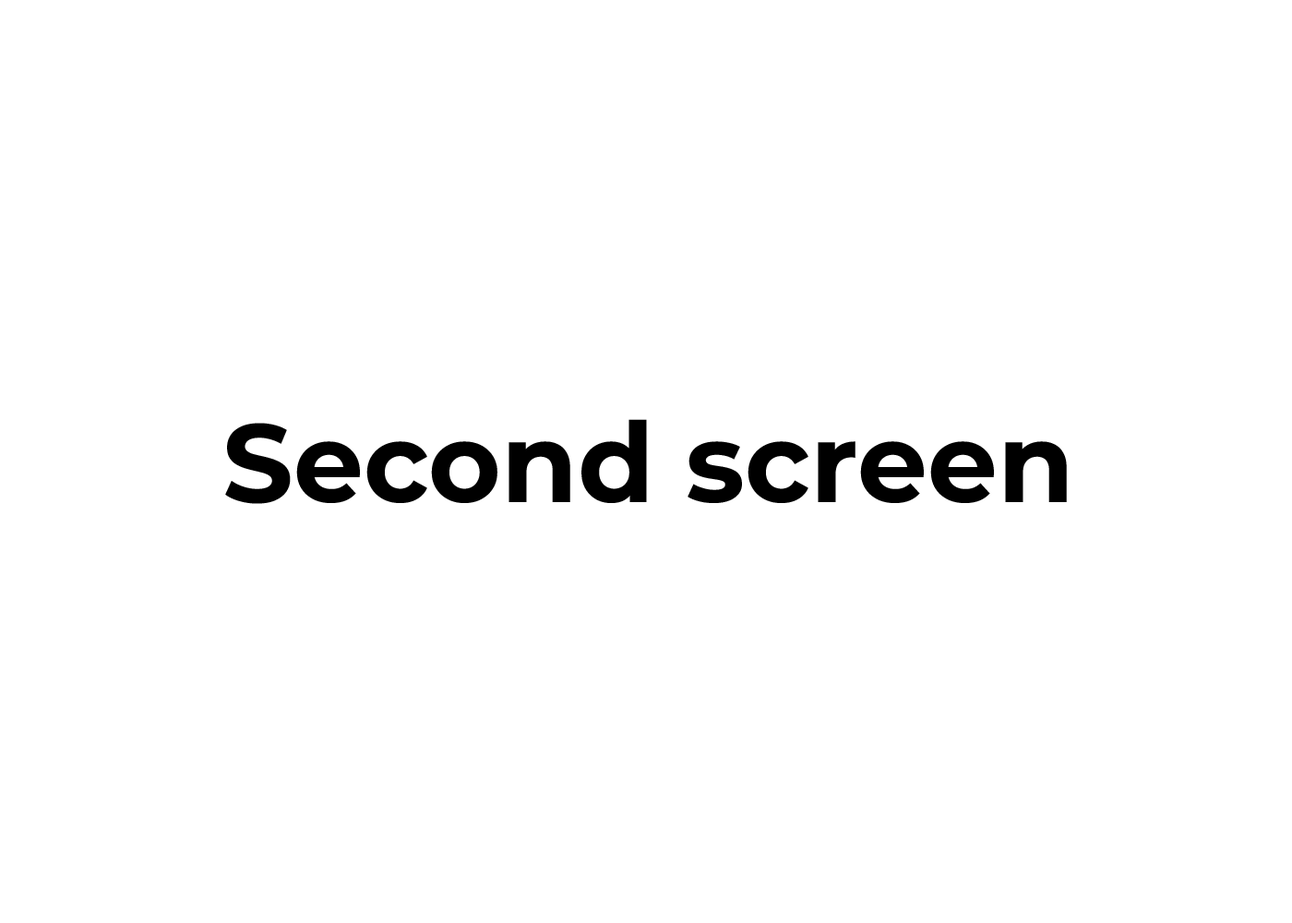
<style>
.page{position:relative;width:1292px;height:923px;background:#ffffff}
.page>*{position:absolute;margin:0}
.t1{font:110.7px "Montserrat-Bold";color:#000000}
</style>
<div class="page">
<p class="t1" style="left:225px;top:419px;width:842px;height:85px">Second screen</p>
</div>
